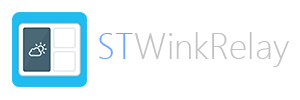
<style>
.page{position:relative;width:300px;height:100px;background:#ffffff}
.page>*{position:absolute;margin:0}
.t1{font:36px "SegoeUI-Light";color:#c2c2c2}
.t2{font:36px "SegoeUI-Light";color:#6da4ff}
</style>
<div class="page">
<p class="t1" style="left:99px;top:32px;width:190px;height:35px"><span class="t2">ST</span>WinkRelay</p>
</div>
